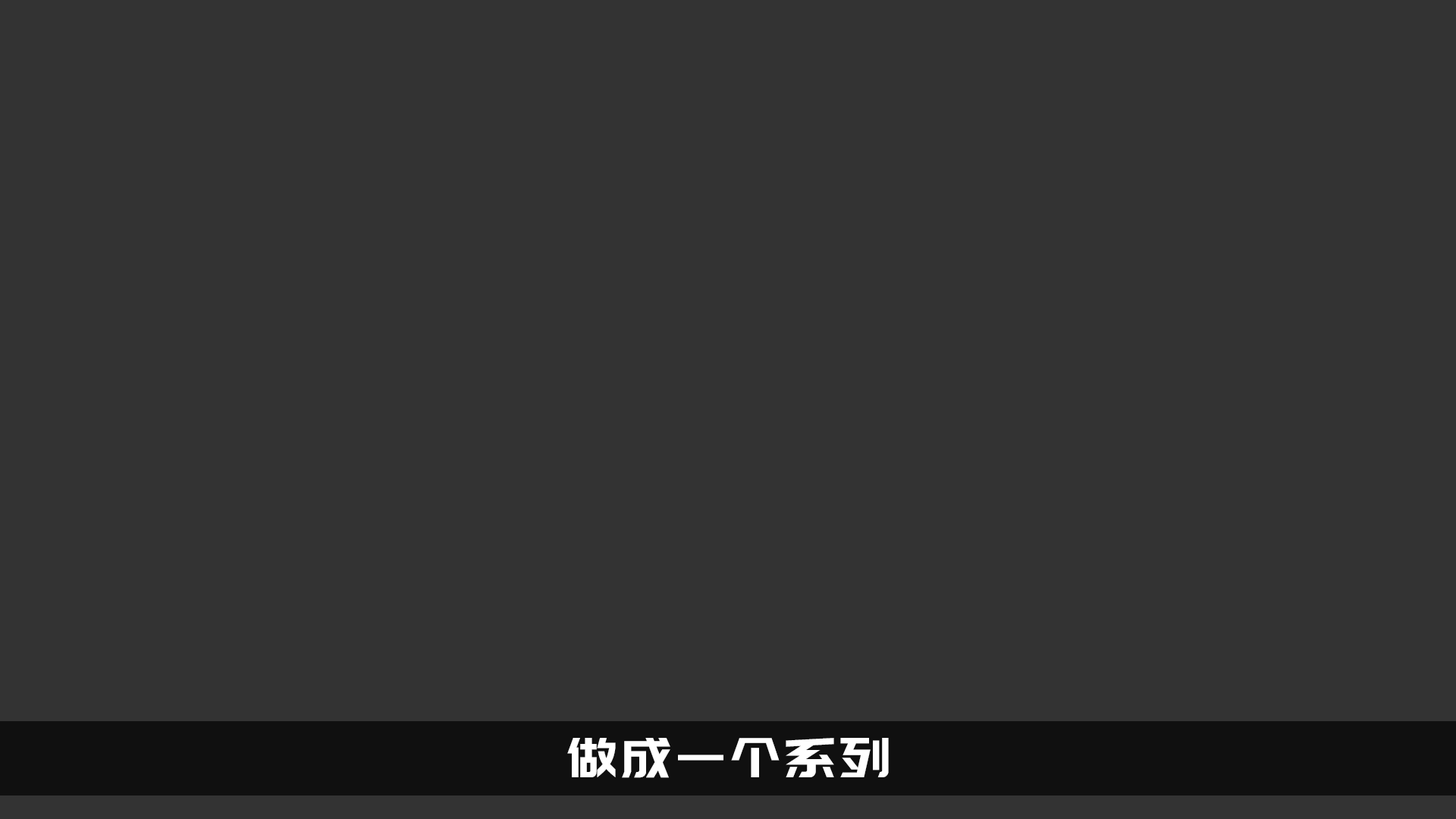
<style>
.page{position:relative;width:1456px;height:819px;background:#333333}
.page>*{position:absolute;margin:0}
.t1{font:54.6px "PangMenZhengDao-3";color:#ffffff}
</style>
<div class="page">
<p class="t1" style="left:567px;top:738px;width:322px;height:40px">做成一个系列</p>
</div>
